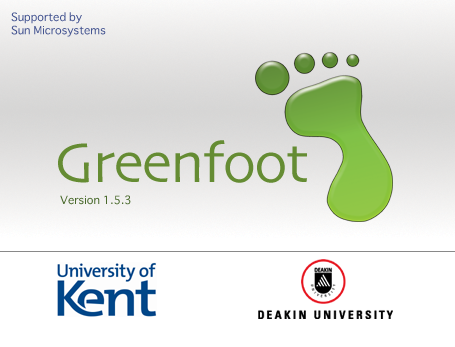
<style>
.page{position:relative;width:455px;height:347px;background:#ffffff}
.page>*{position:absolute;margin:0}
.t1{font:11px "Osaka";color:#455591}
.t2{font:58.3px "Skia-Regular";letter-spacing:-0.025em;color:#658c33}
.t3{font:11px "Osaka";color:#49692c}
</style>
<div class="page">
<p class="t1" style="left:11px;top:12px;width:95px;height:25px">Supported by<br>Sun Microsystems</p>
<p class="t2" style="left:58px;top:140px;width:249px;height:43px">Greenfoot</p>
<p class="t3" style="left:60px;top:195px;width:71px;height:10px">Version 1.5.3</p>
</div>
